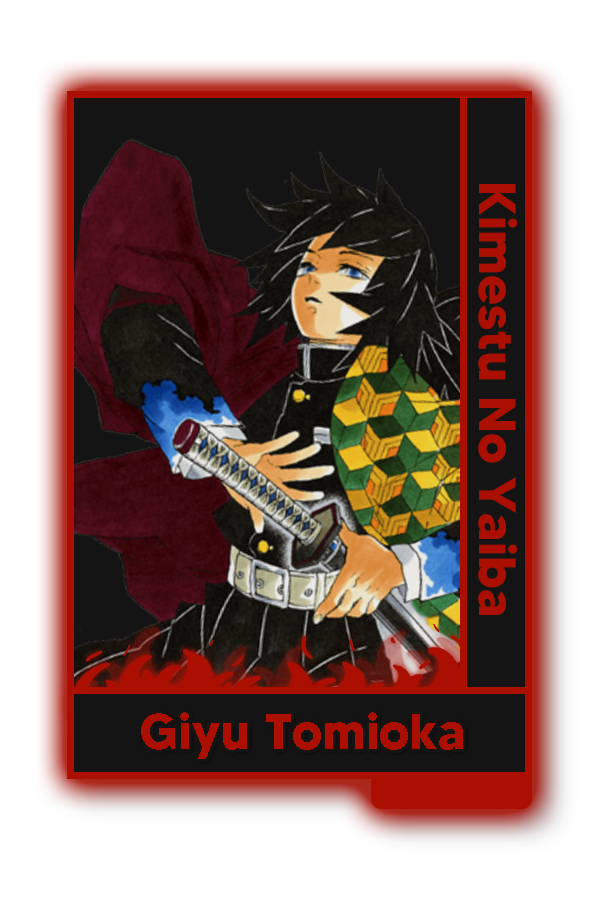
<style>
.page{position:relative;width:600px;height:900px;background:#ffffff}
.page>*{position:absolute;margin:0}
.t1{font:52px "MADETOMMY-Bold";color:#ab0f01}
.t2{font:50.5px "MADETOMMY-Bold";color:#ab0f01}
</style>
<div class="page">
<p class="t1" style="left:478px;top:184px;width:40px;height:431px;rotate:90deg">Kimestu No Yaiba</p>
<p class="t2" style="left:141px;top:712px;width:322px;height:47px">Giyu Tomioka</p>
</div>
